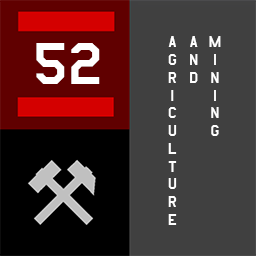
<style>
.page{position:relative;width:256px;height:256px;background:#404040}
.page>*{position:absolute;margin:0}
.t1{font:17.8px "AmarilloUSAF";color:#ffffff}
.t2{font:69.1px "AmarilloUSAF";color:#ffffff}
</style>
<div class="page">
<p class="t1" style="left:168px;top:36px;width:53px;height:189px">mining<br>and<br>agriculture</p>
<p class="t2" style="left:36px;top:43px;width:64px;height:41px">52</p>
</div>
